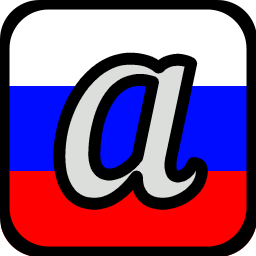
<style>
.page{position:relative;width:256px;height:256px;background:#000000}
.page>*{position:absolute;margin:0}
.t1{font:280.1px "NautilusPompilius"}
</style>
<div class="page">
<p class="t1" style="left:59px;top:58px;width:143px;height:146px">a</p>
</div>
